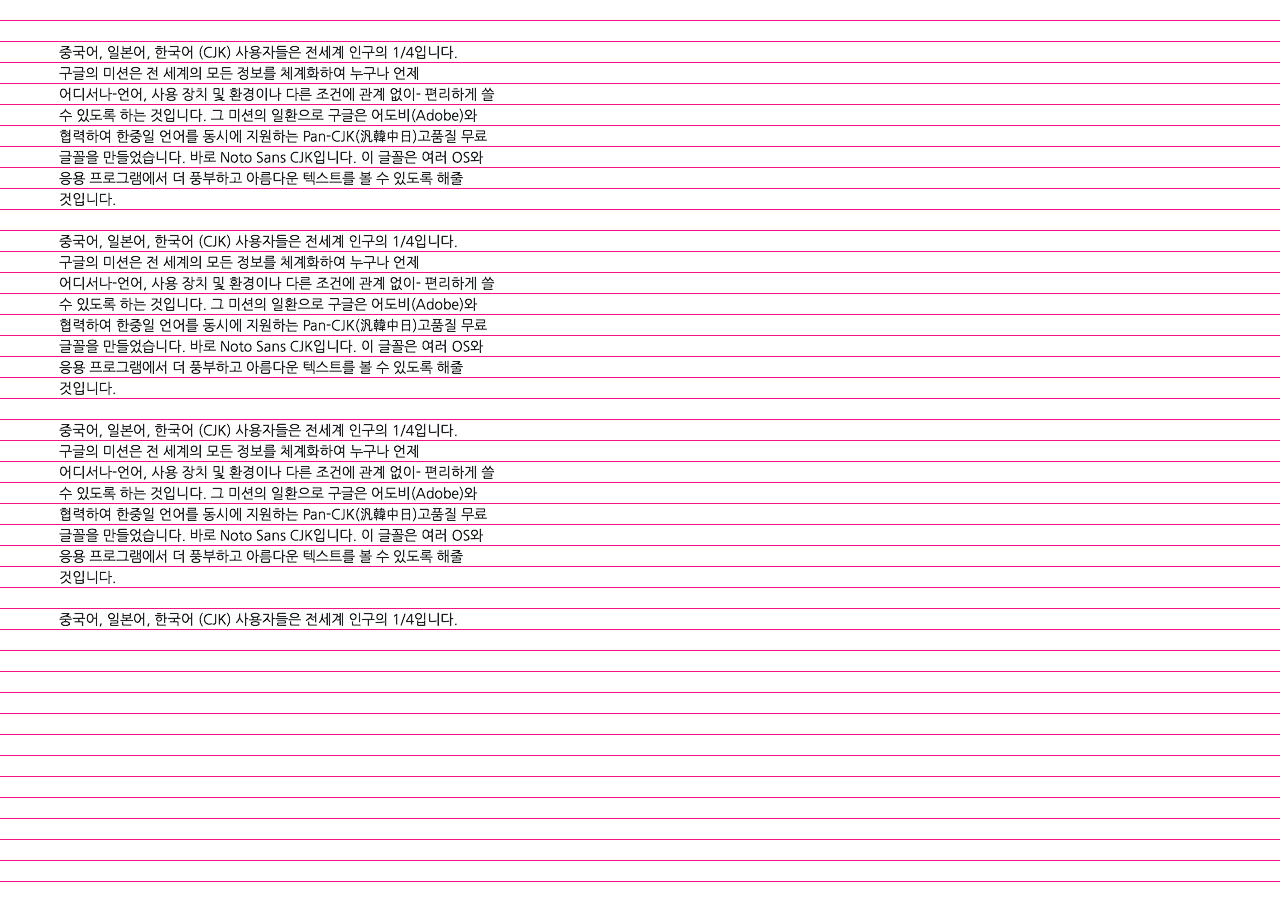
<style>
.page{position:relative;width:1280px;height:900px;background:#ffffff}
.page>*{position:absolute;margin:0}
.t1{font:14px "NanumGothic";color:#1c1f21}
</style>
<div class="page">
<p class="t1" style="left:59px;top:45px;width:436px;height:582px">중국어, 일본어, 한국어 (CJK) 사용자들은 전세계 인구의 1/4입니다. 구글의 미션은 전 세계의 모든 정보를 체계화하여 누구나 언제 어디서나-언어, 사용 장치 및 환경이나 다른 조건에 관계 없이- 편리하게 쓸 수 있도록 하는 것입니다. 그 미션의 일환으로 구글은 어도비(Adobe)와 협력하여 한중일 언어를 동시에 지원하는 Pan-CJK(汎韓中日)고품질 무료 글꼴을 만들었습니다. 바로 Noto Sans CJK입니다. 이 글꼴은 여러 OS와 응용 프로그램에서 더 풍부하고 아름다운 텍스트를 볼 수 있도록 해줄 것입니다.<br>중국어, 일본어, 한국어 (CJK) 사용자들은 전세계 인구의 1/4입니다. 구글의 미션은 전 세계의 모든 정보를 체계화하여 누구나 언제 어디서나-언어, 사용 장치 및 환경이나 다른 조건에 관계 없이- 편리하게 쓸 수 있도록 하는 것입니다. 그 미션의 일환으로 구글은 어도비(Adobe)와 협력하여 한중일 언어를 동시에 지원하는 Pan-CJK(汎韓中日)고품질 무료 글꼴을 만들었습니다. 바로 Noto Sans CJK입니다. 이 글꼴은 여러 OS와 응용 프로그램에서 더 풍부하고 아름다운 텍스트를 볼 수 있도록 해줄 것입니다.<br>중국어, 일본어, 한국어 (CJK) 사용자들은 전세계 인구의 1/4입니다. 구글의 미션은 전 세계의 모든 정보를 체계화하여 누구나 언제 어디서나-언어, 사용 장치 및 환경이나 다른 조건에 관계 없이- 편리하게 쓸 수 있도록 하는 것입니다. 그 미션의 일환으로 구글은 어도비(Adobe)와 협력하여 한중일 언어를 동시에 지원하는 Pan-CJK(汎韓中日)고품질 무료 글꼴을 만들었습니다. 바로 Noto Sans CJK입니다. 이 글꼴은 여러 OS와 응용 프로그램에서 더 풍부하고 아름다운 텍스트를 볼 수 있도록 해줄 것입니다.<br>중국어, 일본어, 한국어 (CJK) 사용자들은 전세계 인구의 1/4입니다. 구글의 미션은 전 세계의 모든 정보를 체계화하여 누구나 언제 어디서나-언어, 사용 장치 및 환경이나 다른 조건에 관계 없이- 편리하게 쓸 수 있도록 하는 것입니다. 그 미션의 일환으로 구글은 어도비(Adobe)와 협력하여 한중일 언어를 동시에 지원하는 Pan-CJK(汎韓中日)고품질 무료 글꼴을 만들었습니다. 바로 Noto Sans CJK입니다. 이 글꼴은 여러 OS와 응용 프로그램에서 더 풍부하고 아름다운 텍스트를 볼 수 있도록 해줄 것입니다.</p>
</div>
